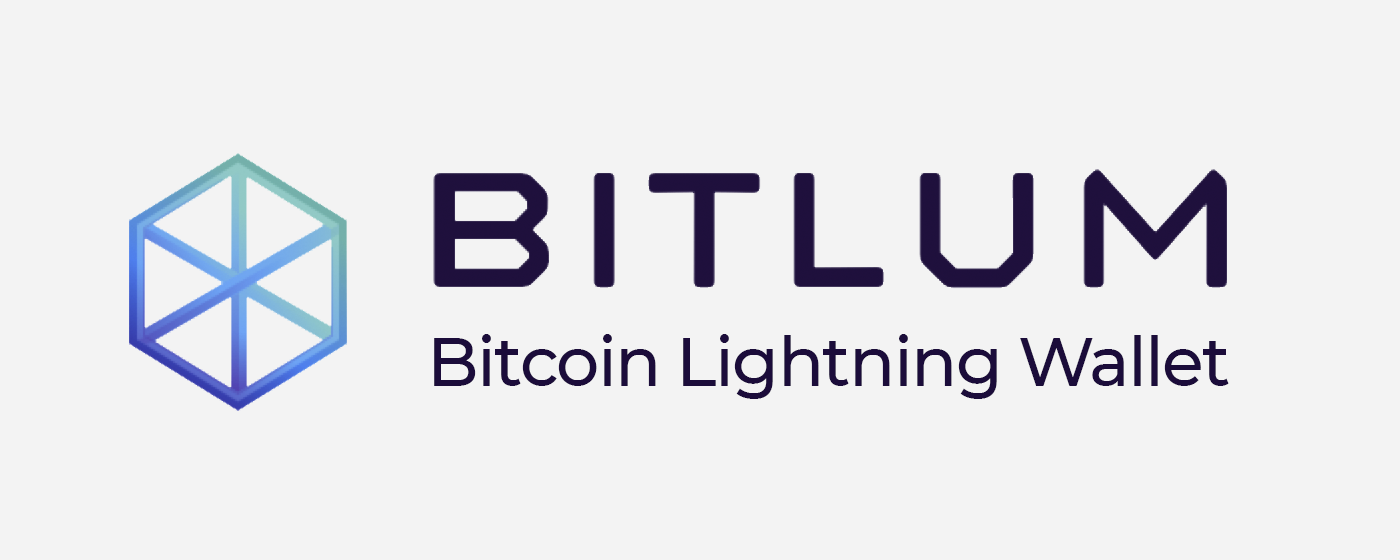
<style>
.page{position:relative;width:1400px;height:560px;background:#f3f3f3}
.page>*{position:absolute;margin:0}
.t1{font:68.1px "Montserrat-Medium";letter-spacing:-0.025em;color:#1b0c3a}
</style>
<div class="page">
<p class="t1" style="left:434px;top:334px;width:795px;height:65px">Bitcoin Lightning Wallet</p>
</div>
